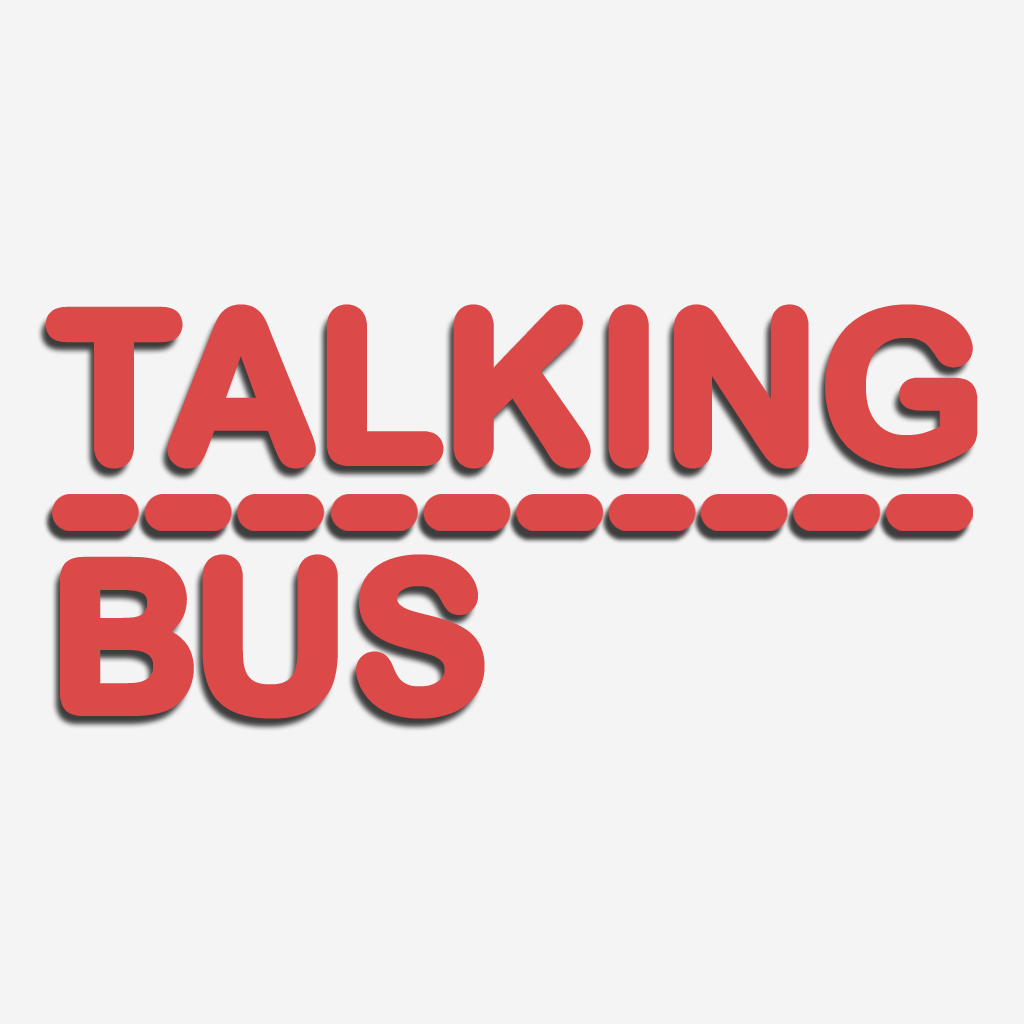
<style>
.page{position:relative;width:1024px;height:1024px;background:#f4f4f4}
.page>*{position:absolute;margin:0}
.t1{font:208.3px "ArialRoundedMTBold";color:#db4949}
</style>
<div class="page">
<p class="t1" style="left:50px;top:309px;width:923px;height:405px">TALKING<br>BUS</p>
</div>
